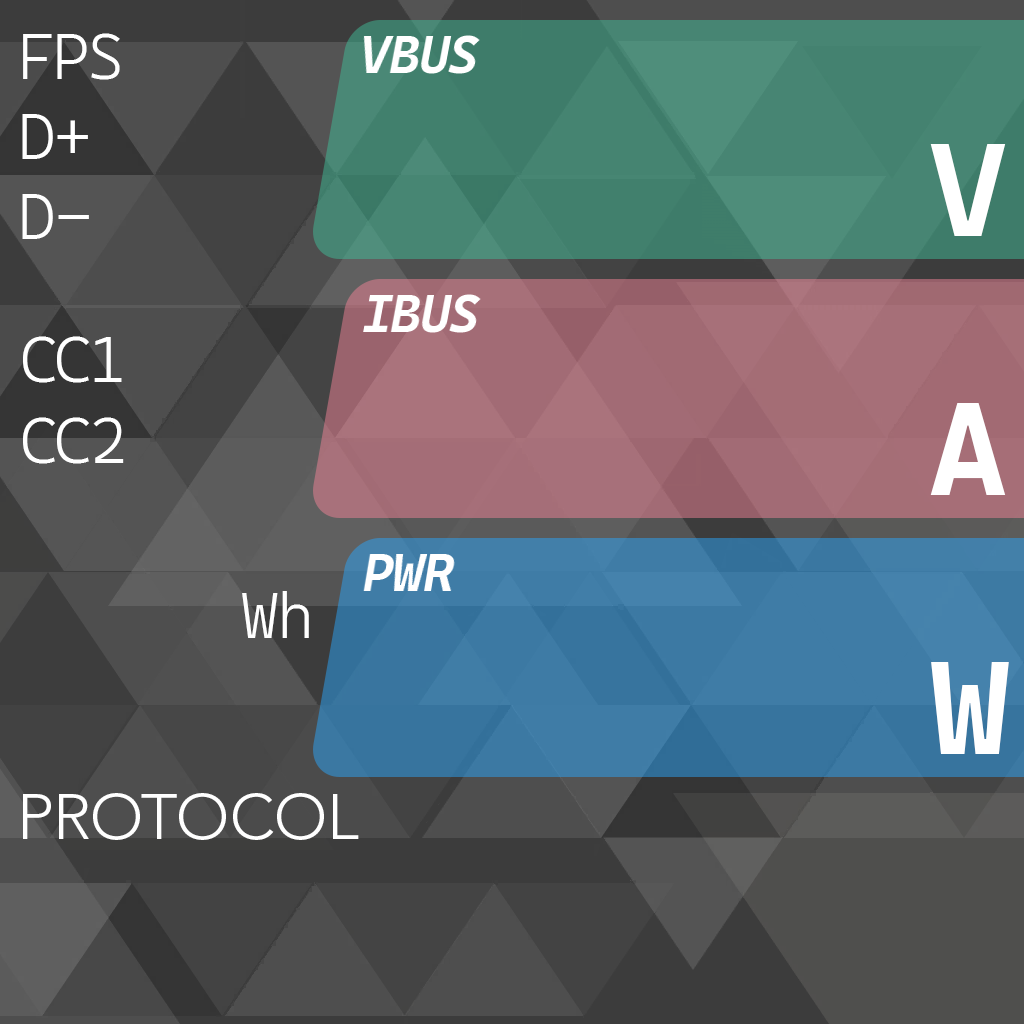
<style>
.page{position:relative;width:1024px;height:1024px}
.page>*{position:absolute;margin:0}
.t1{font:64px "CascadiaCode-Light";color:#ffffff}
.t2{font:133.3px "CascadiaMonoRoman-Bold";color:#ffffff}
.t3{font:64px "AvenirLTStd-Light";letter-spacing:0.025em;color:#ffffff}
</style>
<div class="page">
<p class="t1" style="left:23px;top:33px;width:97px;height:47px">FPS</p>
<p class="t1" style="left:22px;top:114px;width:66px;height:45px">D+</p>
<p class="t2" style="left:930px;top:144px;width:76px;height:92px">V</p>
<p class="t1" style="left:22px;top:194px;width:67px;height:45px">D-</p>
<p class="t1" style="left:23px;top:336px;width:99px;height:47px">CC1</p>
<p class="t2" style="left:930px;top:403px;width:76px;height:92px">A</p>
<p class="t1" style="left:23px;top:417px;width:101px;height:47px">CC2</p>
<p class="t1" style="left:242px;top:591px;width:67px;height:47px">Wh</p>
<p class="t2" style="left:931px;top:662px;width:78px;height:92px">W</p>
<p class="t3" style="left:23px;top:793px;width:336px;height:47px">PROTOCOL</p>
</div>
